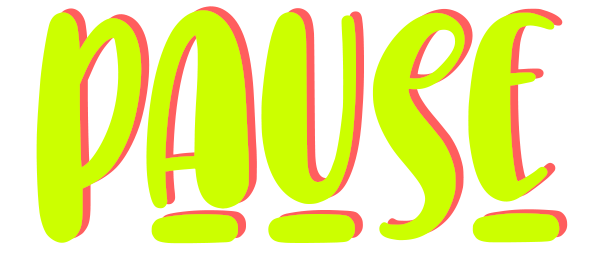
<style>
.page{position:relative;width:600px;height:255px;background:#ffffff}
.page>*{position:absolute;margin:0}
.t1{font:243px "ChocoLetter";color:#ccff00;scale:0.87 1}
</style>
<div class="page">
<p class="t1" style="left:36px;top:10px;width:524px;height:234px">Pause</p>
</div>
